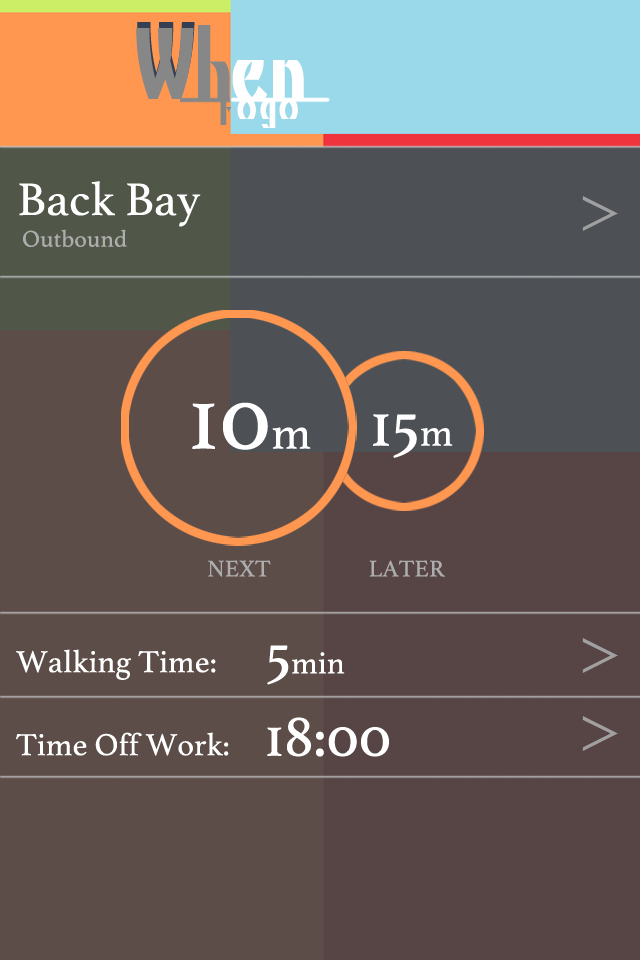
<style>
.page{position:relative;width:640px;height:960px;background:#5d4d48}
.page>*{position:absolute;margin:0}
.t1{font:100.7px "KinoMT";letter-spacing:0.005em;color:#878787}
.t2{font:100.7px "KinoMT";letter-spacing:0.005em;color:#878787;scale:1.03 1}
.t3{font:100.7px "KinoMT";letter-spacing:0.005em;color:#ffffff}
.t4{font:48px "KinoMT";letter-spacing:0.005em;color:#878787;scale:1.03 1}
.t5{font:48px "KinoMT";letter-spacing:0.005em;color:#fffefe;scale:1.03 1}
.t6{font:48px "Athelas-Regular";letter-spacing:0.005em;color:#ffffff}
.t7{font:64px "BigCaslon-Medium";letter-spacing:0.005em;color:#a0a0a0}
.t8{font:24px "Athelas-Regular";letter-spacing:0.005em;color:#adadad}
.t9{font:96px "Athelas-Regular";letter-spacing:0.005em;color:#ffffff}
.t10{font:66.7px "Athelas-Regular";letter-spacing:0.005em;color:#ffffff}
.t11{font:40px "Athelas-Regular";letter-spacing:0.005em;color:#ffffff}
.t12{font:32px "Athelas-Regular";letter-spacing:0.005em;color:#ffffff}
.t13{font:60px "Athelas-Regular";letter-spacing:0.005em;color:#ffffff}
</style>
<div class="page">
<p class="t1" style="left:136px;top:28px;width:58px;height:71px">W</p>
<p class="t1" style="left:137px;top:22px;width:58px;height:71px">W</p>
<p class="t2" style="left:198px;top:25px;width:32px;height:74px">h</p>
<p class="t3" style="left:232px;top:60px;width:72px;height:38px">en</p>
<p class="t4" style="left:220px;top:101px;width:12px;height:24px">t</p>
<p class="t5" style="left:237px;top:101px;width:19px;height:18px">o</p>
<p class="t5" style="left:260px;top:101px;width:38px;height:27px">go</p>
<p class="t6" style="left:19px;top:181px;width:182px;height:46px">Back Bay</p>
<p class="t7" style="left:582px;top:196px;width:36px;height:35px">&gt;</p>
<p class="t8" style="left:23px;top:229px;width:104px;height:18px">Outbound</p>
<p class="t9" style="left:192px;top:402px;width:119px;height:48px">10<span class="t6">m</span></p>
<p class="t10" style="left:373px;top:414px;width:80px;height:44px">15<span class="t11">m</span></p>
<p class="t8" style="left:208px;top:560px;width:237px;height:17px">NEXT                   LATER</p>
<p class="t7" style="left:582px;top:638px;width:36px;height:35px">&gt;</p>
<p class="t12" style="left:16px;top:649px;width:200px;height:31px">Walking Time:</p>
<p class="t12" style="left:267px;top:645px;width:78px;height:40px"><span class="t13">5</span>min</p>
<p class="t13" style="left:267px;top:717px;width:122px;height:40px">18:00</p>
<p class="t7" style="left:582px;top:716px;width:36px;height:35px">&gt;</p>
<p class="t12" style="left:16px;top:732px;width:213px;height:24px">Time Off Work:</p>
</div>
